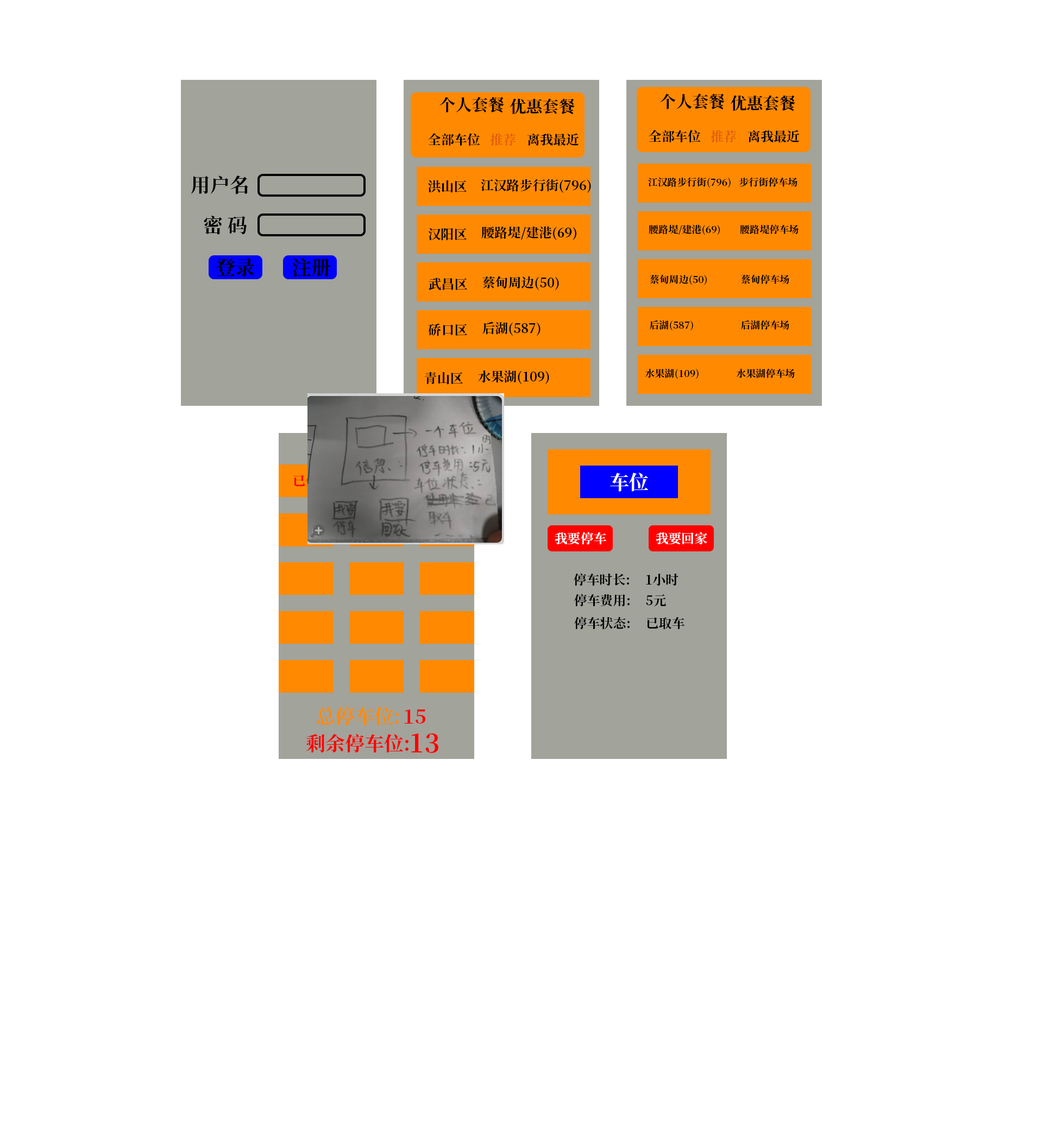
<style>
.page{position:relative;width:1043px;height:1143px;background:#ffffff}
.page>*{position:absolute;margin:0}
.t1{font:16.3px "SourceHanSerifSC-Bold";color:#000000}
.t2{font:13px "SourceHanSerifSC-Bold";color:#000000}
.t3{font:13px "SourceHanSerifSC-Bold";color:#e25d0d}
.t4{font:19.6px "SourceHanSerifSC-Bold";color:#000000}
.t5{font:9.8px "SourceHanSerifSC-Bold";color:#000000}
.t6{font:19.6px "SourceHanSerifSC-Bold";color:#ffffff}
.t7{font:13px "SourceHanSerifSC-Bold"}
.t8{font:13px "SourceHanSerifSC-Bold";color:#ffffff}
.t9{font:19.6px "SourceHanSerifSC-Bold";color:#ff8a01}
.t10{font:19.6px "SourceHanSerifSC-Bold";color:#ff0000}
.t11{font:26.1px "SourceHanSerifSC-Bold";color:#ff0000}
</style>
<div class="page">
<p class="t1" style="left:440px;top:97px;width:64px;height:16px">个人套餐</p>
<p class="t1" style="left:510px;top:98px;width:65px;height:17px">优惠套餐</p>
<p class="t1" style="left:660px;top:93px;width:65px;height:17px">个人套餐</p>
<p class="t1" style="left:731px;top:95px;width:64px;height:16px">优惠套餐</p>
<p class="t2" style="left:428px;top:133px;width:52px;height:13px">全部车位</p>
<p class="t3" style="left:490px;top:133px;width:26px;height:13px">推荐</p>
<p class="t2" style="left:528px;top:133px;width:51px;height:13px">离我最近</p>
<p class="t2" style="left:649px;top:130px;width:52px;height:13px">全部车位</p>
<p class="t3" style="left:711px;top:130px;width:25px;height:13px">推荐</p>
<p class="t2" style="left:748px;top:130px;width:52px;height:13px">离我最近</p>
<p class="t4" style="left:191px;top:175px;width:57px;height:20px">用户名</p>
<p class="t2" style="left:428px;top:180px;width:39px;height:13px">洪山区</p>
<p class="t2" style="left:481px;top:179px;width:110px;height:14px">江汉路步行街(796)</p>
<p class="t5" style="left:648px;top:177px;width:83px;height:11px">江汉路步行街(796)</p>
<p class="t5" style="left:739px;top:177px;width:59px;height:10px">步行街停车场</p>
<p class="t4" style="left:204px;top:216px;width:43px;height:19px">密 码</p>
<p class="t2" style="left:428px;top:228px;width:39px;height:13px">汉阳区</p>
<p class="t2" style="left:481px;top:226px;width:95px;height:14px">腰路堤/建港(69)</p>
<p class="t5" style="left:649px;top:224px;width:71px;height:11px">腰路堤/建港(69)</p>
<p class="t5" style="left:740px;top:224px;width:59px;height:11px">腰路堤停车场</p>
<p class="t4" style="left:216px;top:258px;width:38px;height:19px">登录</p>
<p class="t4" style="left:292px;top:258px;width:39px;height:19px">注册</p>
<p class="t2" style="left:429px;top:278px;width:38px;height:13px">武昌区</p>
<p class="t2" style="left:482px;top:276px;width:77px;height:14px">蔡甸周边(50)</p>
<p class="t5" style="left:650px;top:274px;width:57px;height:11px">蔡甸周边(50)</p>
<p class="t5" style="left:741px;top:274px;width:48px;height:10px">蔡甸停车场</p>
<p class="t2" style="left:428px;top:323px;width:39px;height:13px">硚口区</p>
<p class="t2" style="left:482px;top:322px;width:59px;height:14px">后湖(587)</p>
<p class="t5" style="left:650px;top:320px;width:43px;height:11px">后湖(587)</p>
<p class="t5" style="left:741px;top:320px;width:48px;height:10px">后湖停车场</p>
<p class="t2" style="left:424px;top:372px;width:39px;height:13px">青山区</p>
<p class="t2" style="left:478px;top:370px;width:71px;height:14px">水果湖(109)</p>
<p class="t5" style="left:645px;top:368px;width:54px;height:11px">水果湖(109)</p>
<p class="t5" style="left:736px;top:368px;width:59px;height:10px">水果湖停车场</p>
<p class="t6" style="left:610px;top:473px;width:38px;height:19px">车位</p>
<p class="t7" style="left:293px;top:474px;width:25px;height:13px">已停</p>
<p class="t8" style="left:555px;top:532px;width:52px;height:13px">我要停车</p>
<p class="t8" style="left:656px;top:532px;width:51px;height:12px">我要回家</p>
<p class="t2" style="left:574px;top:573px;width:55px;height:13px">停车时长:</p>
<p class="t2" style="left:646px;top:573px;width:33px;height:13px">1小时</p>
<p class="t2" style="left:574px;top:594px;width:56px;height:13px">停车费用:</p>
<p class="t2" style="left:646px;top:594px;width:20px;height:13px">5元</p>
<p class="t2" style="left:574px;top:617px;width:56px;height:13px">停车状态:</p>
<p class="t2" style="left:647px;top:617px;width:38px;height:13px">已取车</p>
<p class="t9" style="left:316px;top:707px;width:83px;height:19px">总停车位:</p>
<p class="t10" style="left:404px;top:710px;width:21px;height:14px">15</p>
<p class="t10" style="left:306px;top:734px;width:103px;height:19px">剩余停车位:</p>
<p class="t11" style="left:411px;top:733px;width:27px;height:20px">13</p>
</div>
